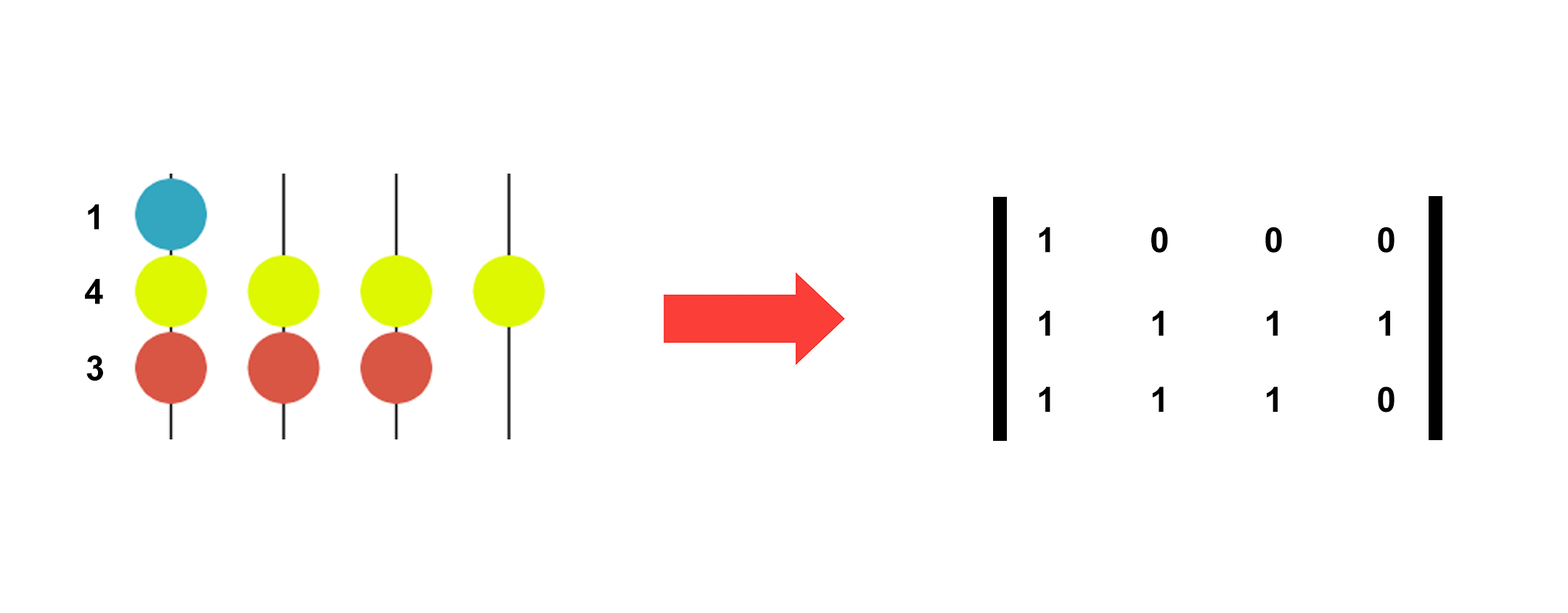
<style>
.page{position:relative;width:1568px;height:613px;background:#ffffff}
.page>*{position:absolute;margin:0}
.t1{font:34.8px "Arial-BoldMT";color:#000000}
</style>
<div class="page">
<p class="t1" style="left:88px;top:204px;width:11px;height:25px">1</p>
<p class="t1" style="left:1039px;top:226px;width:11px;height:27px">1</p>
<p class="t1" style="left:1151px;top:226px;width:17px;height:27px">0</p>
<p class="t1" style="left:1265px;top:226px;width:17px;height:27px">0</p>
<p class="t1" style="left:1378px;top:226px;width:17px;height:27px">0</p>
<p class="t1" style="left:85px;top:279px;width:18px;height:25px">4</p>
<p class="t1" style="left:1039px;top:310px;width:11px;height:26px">1</p>
<p class="t1" style="left:1152px;top:310px;width:12px;height:26px">1</p>
<p class="t1" style="left:1267px;top:310px;width:11px;height:26px">1</p>
<p class="t1" style="left:1379px;top:310px;width:11px;height:26px">1</p>
<p class="t1" style="left:86px;top:355px;width:17px;height:26px">3</p>
<p class="t1" style="left:1039px;top:386px;width:11px;height:26px">1</p>
<p class="t1" style="left:1152px;top:386px;width:12px;height:26px">1</p>
<p class="t1" style="left:1267px;top:386px;width:11px;height:26px">1</p>
<p class="t1" style="left:1378px;top:386px;width:17px;height:26px">0</p>
</div>
